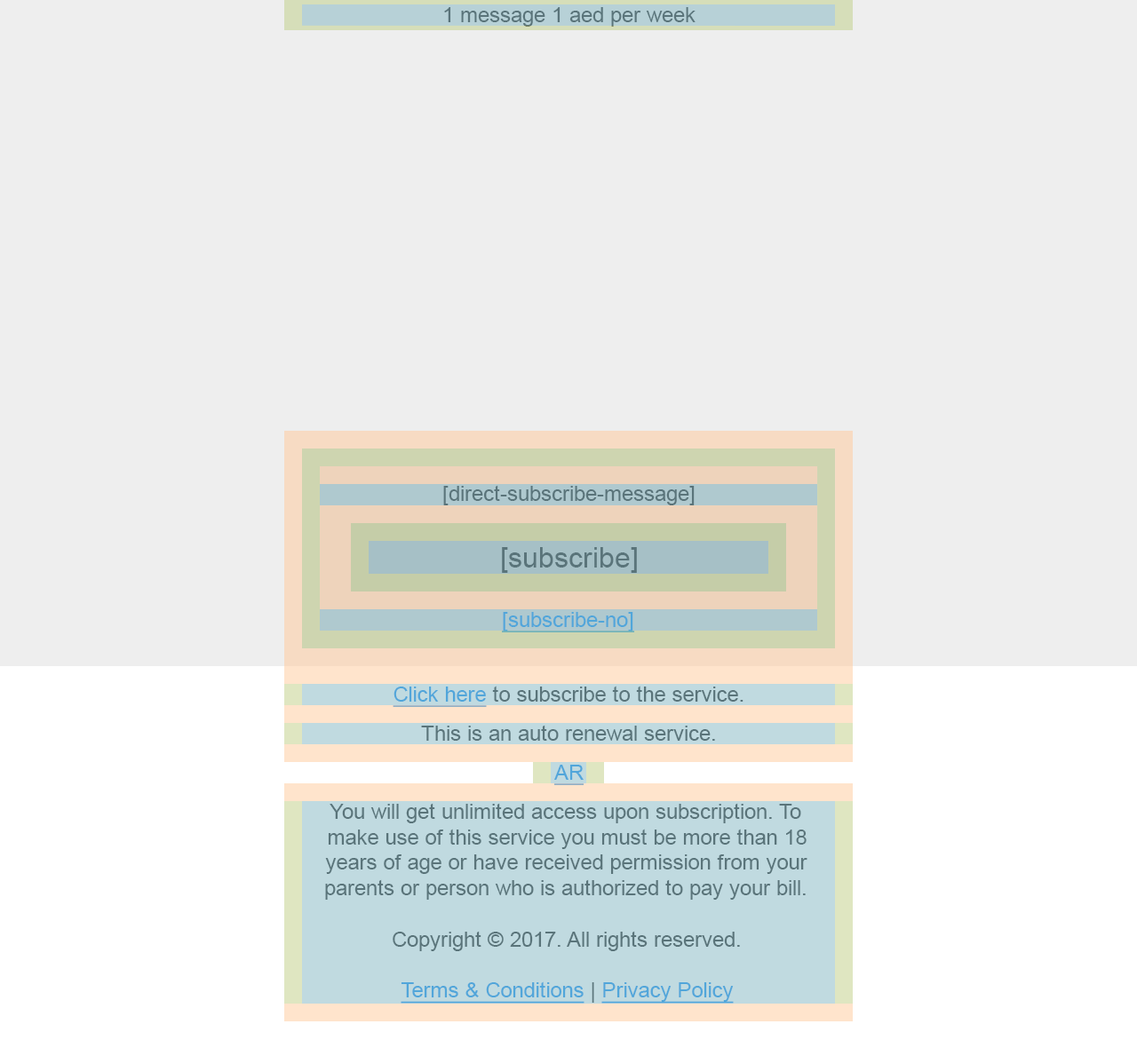
<style>
.page{position:relative;width:1137px;height:1048px;background:#eeeeee}
.page>*{position:absolute;margin:0}
.t1{font:21.3px "ArialMT";color:#5a747a}
.t2{font:28.4px "ArialMT";color:#5a747a}
.t3{font:21.3px "ArialMT";color:#51a6da;text-decoration:underline}
.t4{font:21.3px "ArialMT"}
.t5{font:21.3px "ArialMT";text-decoration:underline}
.t6{font:21.3px "ArialMT";color:#5a747a;text-decoration:underline}
</style>
<div class="page">
<p class="t1" style="left:444px;top:7px;width:252px;height:20px">1 message 1 aed per week</p>
<p class="t1" style="left:443px;top:485px;width:252px;height:21px">[direct-subscribe-message]</p>
<p class="t2" style="left:502px;top:547px;width:135px;height:26px">[subscribe]</p>
<p class="t3" style="left:502px;top:612px;width:133px;height:21px">[subscribe-no]</p>
<p class="t4" style="left:393px;top:686px;width:351px;height:21px"><span class="t5">Click here</span> to subscribe to the service.</p>
<p class="t1" style="left:421px;top:725px;width:294px;height:16px">This is an auto renewal service.</p>
<p class="t3" style="left:554px;top:765px;width:31px;height:20px">AR</p>
<p class="t1" style="left:325px;top:803px;width:483px;height:201px;text-align:center">You will get unlimited access upon subscription. To make use of this service you must be more than 18 years of age or have received permission from your parents or person who is authorized to pay your bill.<br><br>Copyright © 2017. All rights reserved.<br><br><span class="t6">Terms &amp; Conditions</span> | <span class="t6">Privacy Policy</span></p>
</div>
